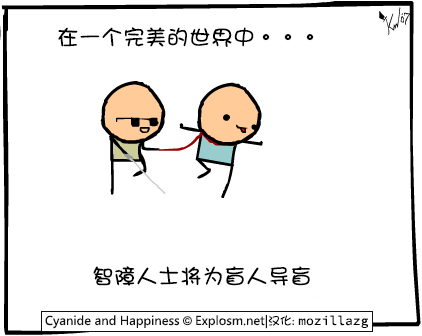
<style>
.page{position:relative;width:422px;height:336px;background:#ffffff}
.page>*{position:absolute;margin:0}
.t1{font:22px "DFGirl";color:#000000}
</style>
<div class="page">
<p class="t1" style="left:58px;top:27px;width:256px;height:20px">在一个完美的世界中。。。</p>
<p class="t1" style="left:93px;top:266px;width:218px;height:20px">智障人士将为盲人导盲</p>
</div>
